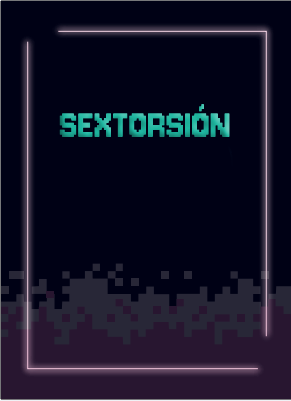
<style>
.page{position:relative;width:291px;height:401px;background:#000115}
.page>*{position:absolute;margin:0}
.t1{font:43.3px "Jersey10-Regular"}
</style>
<div class="page">
<p class="t1" style="left:59px;top:104px;width:171px;height:33px">SEXTORSIÓN</p>
</div>
